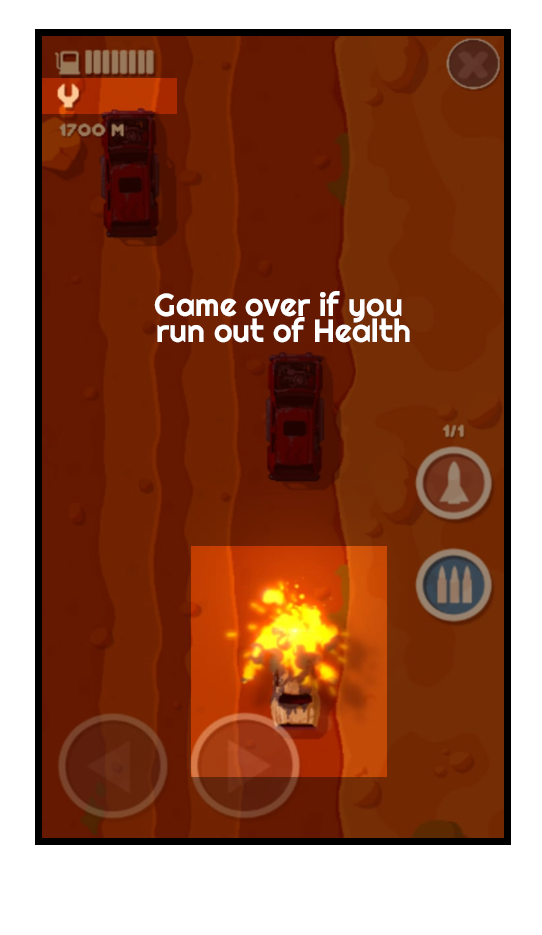
<style>
.page{position:relative;width:542px;height:935px;background:#ffffff}
.page>*{position:absolute;margin:0}
.t1{font:32px/26.5px "Righteous-Regular";color:#ffffff}
</style>
<div class="page">
<p class="t1" style="left:154px;top:291px;width:256px;height:52px;text-align:center">Game over if you <br>run out of Health</p>
</div>
